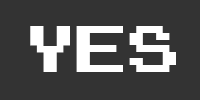
<style>
.page{position:relative;width:200px;height:100px;background:#333333}
.page>*{position:absolute;margin:0}
.t1{font:52.7px "Emulogic";color:#ffffff}
</style>
<div class="page">
<p class="t1" style="left:30px;top:26px;width:146px;height:46px">YES</p>
</div>
